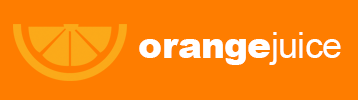
<style>
.page{position:relative;width:358px;height:100px;background:#fe7d00}
.page>*{position:absolute;margin:0}
.t1{font:36px "Arial-Black";letter-spacing:-0.02em;color:#ffffff}
.t2{font:36px "ArialMT";letter-spacing:-0.02em;color:#ffffff}
</style>
<div class="page">
<p class="t1" style="left:139px;top:32px;width:202px;height:33px">orange<span class="t2">juice</span></p>
</div>
